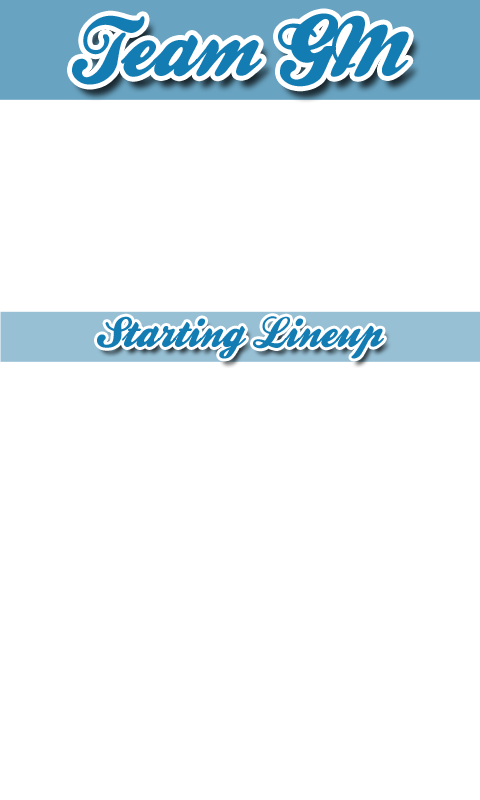
<style>
.page{position:relative;width:480px;height:800px;background:#ffffff}
.page>*{position:absolute;margin:0}
.t1{font:86.6px "BallparkWeiner";color:#137cb2}
.t2{font:44.2px "BallparkWeiner";color:#137cb2}
</style>
<div class="page">
<p class="t1" style="left:72px;top:13px;width:337px;height:74px">Team GM</p>
<p class="t2" style="left:97px;top:316px;width:287px;height:43px">Starting Lineup</p>
</div>
